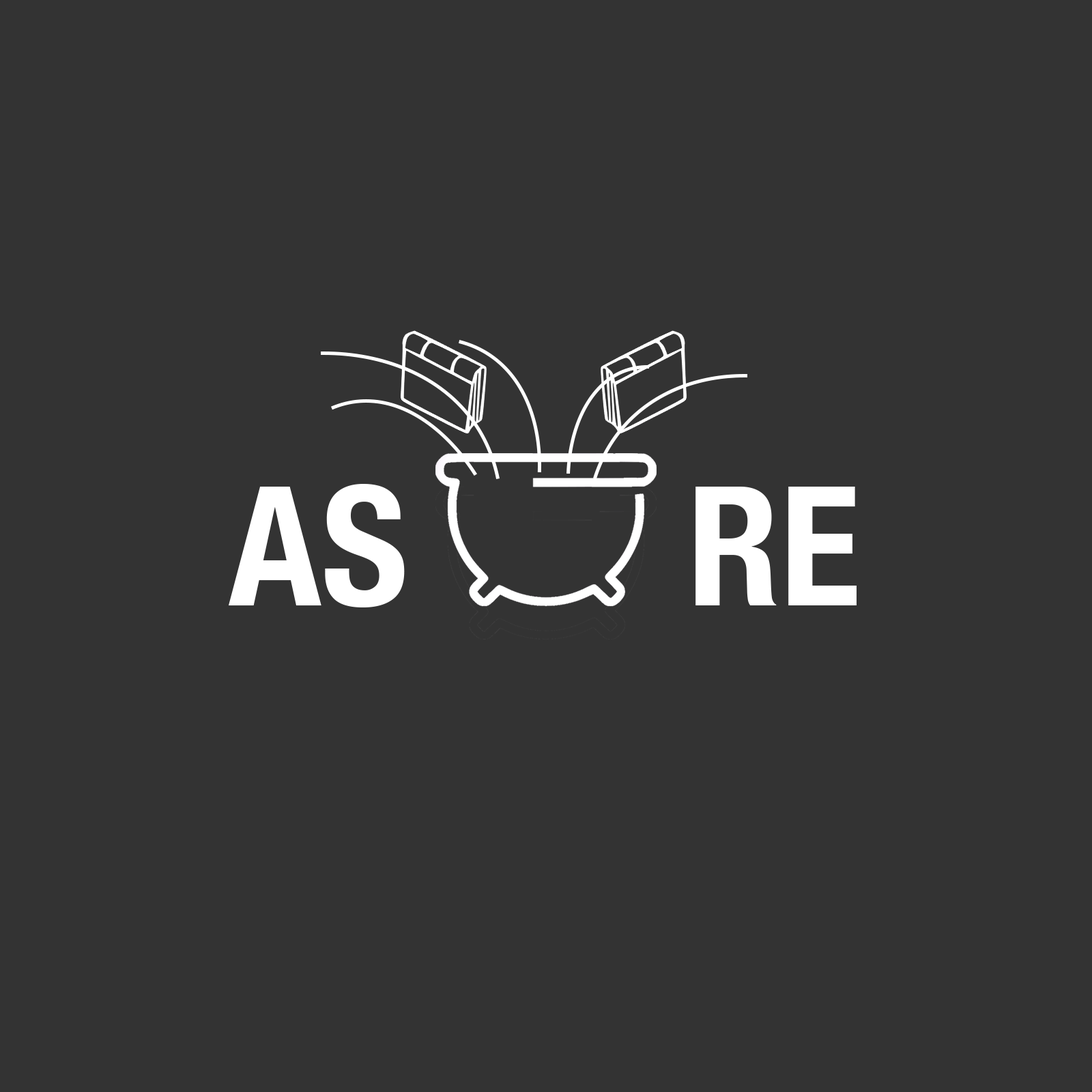
<style>
.page{position:relative;width:1092px;height:1092px;background:#333333}
.page>*{position:absolute;margin:0}
.t1{font:166.8px "HelveticaNeue-CondensedBold";color:#ffffff}
</style>
<div class="page">
<p class="t1" style="left:229px;top:484px;width:176px;height:123px">AS</p>
<p class="t1" style="left:695px;top:487px;width:162px;height:118px">RE</p>
</div>
